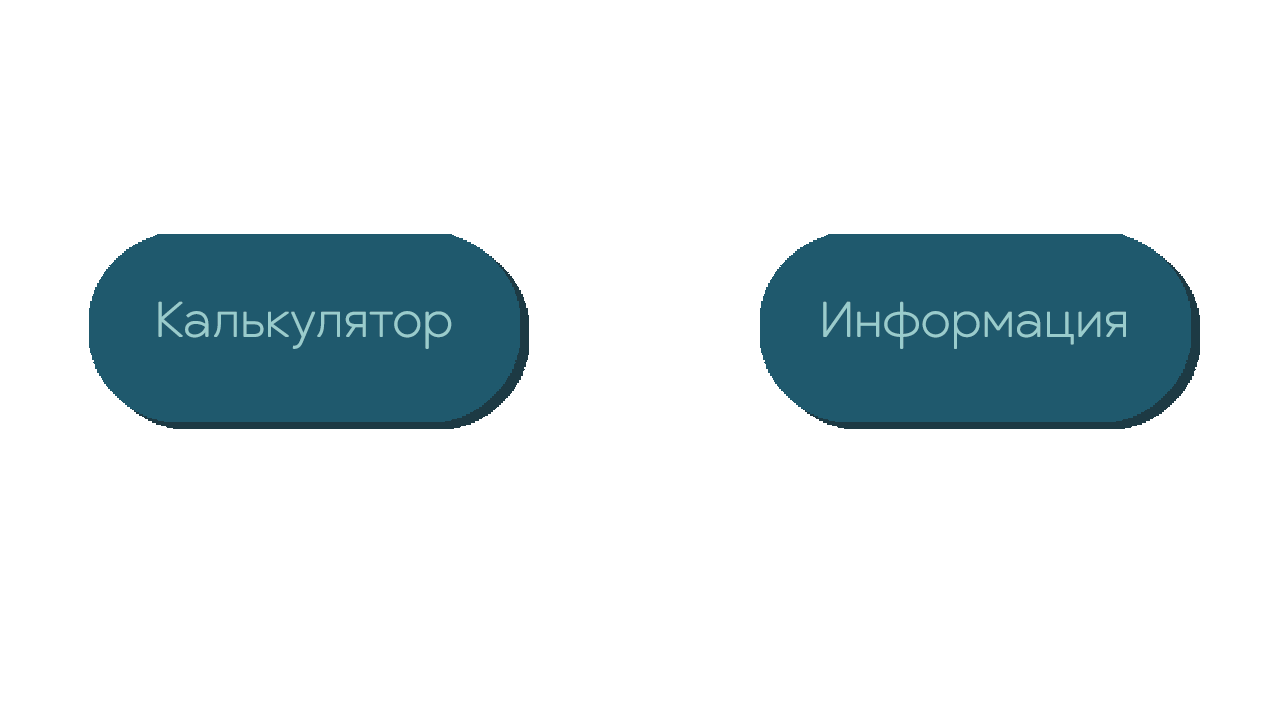
<style>
.page{position:relative;width:1280px;height:720px;background:#ffffff}
.page>*{position:absolute;margin:0}
.t1{font:48px "OktaNeue-UltraLight";color:#99cccc;font-weight:bold}
</style>
<div class="page">
<p class="t1" style="left:158px;top:301px;width:294px;height:48px">Калькулятор</p>
<p class="t1" style="left:823px;top:301px;width:303px;height:48px">Информация</p>
</div>
